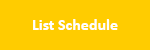
<style>
.page{position:relative;width:150px;height:50px;background:#ffcc00}
.page>*{position:absolute;margin:0}
.t1{font:16px "Calibri-Bold";color:#ffffff}
</style>
<div class="page">
<p class="t1" style="left:33px;top:19px;width:85px;height:11px">List Schedule</p>
</div>
